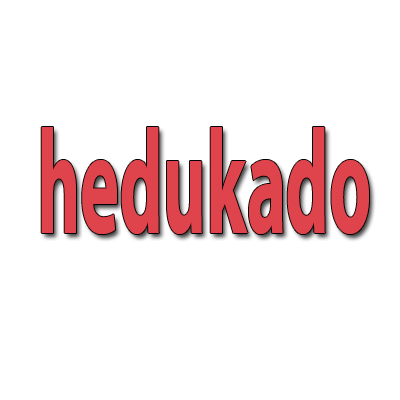
<style>
.page{position:relative;width:400px;height:400px;background:#ffffff}
.page>*{position:absolute;margin:0}
.t1{font:149px "MyriadPro-Bold";color:#df444c;scale:0.5 1}
</style>
<div class="page">
<p class="t1" style="left:41px;top:127px;width:328px;height:107px">hedukado</p>
</div>
